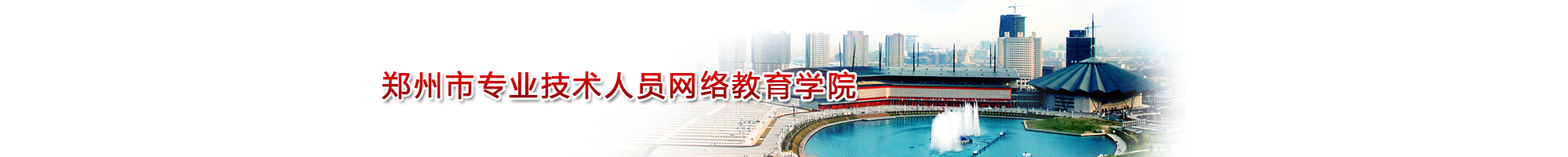
<style>
.page{position:relative;width:1568px;height:157px;background:#ffffff}
.page>*{position:absolute;margin:0}
.t1{font:28.2px "MicrosoftYaHei";letter-spacing:0.1em;color:#cc0606;font-weight:bold}
</style>
<div class="page">
<p class="t1" style="left:382px;top:71px;width:474px;height:29px">郑州市专业技术人员网络教育学院</p>
</div>
